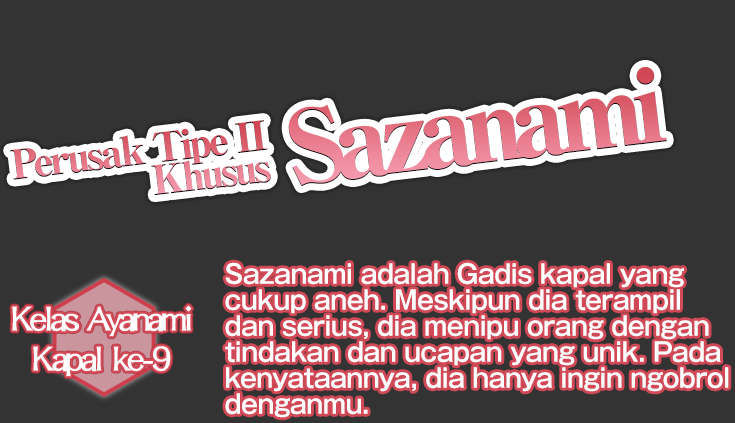
<style>
.page{position:relative;width:735px;height:423px;background:#333333}
.page>*{position:absolute;margin:0}
.t1{font:100px "RyuminPro-ExHeavy";letter-spacing:-0.1em}
.t2{font:26px/26px "GothicMB101Pro-DeBold";letter-spacing:-0.02em;color:#fdfdfd;scale:0.95 1}
.t3{font:40px/40px "DFLungMen-W9-WINP-BF";letter-spacing:-0.09em;color:#fdfdfd}
</style>
<div class="page">
<p class="t1" style="left:288px;top:67px;width:379px;height:120px;rotate:-7deg">Sazanami</p>
<p class="t2" style="left:225px;top:262px;width:504px;height:156px">Sazanami adalah Gadis kapal yang<br>cukup aneh. Meskipun dia terampil <br>dan serius, dia menipu orang dengan<br>tindakan dan ucapan yang unik. Pada<br>kenyataannya, dia hanya ingin ngobrol<br>denganmu.</p>
<p class="t3" style="left:12px;top:305px;width:180px;height:72px;text-align:center">Kelas Ayanami<br>Kapal ke-9</p>
</div>
